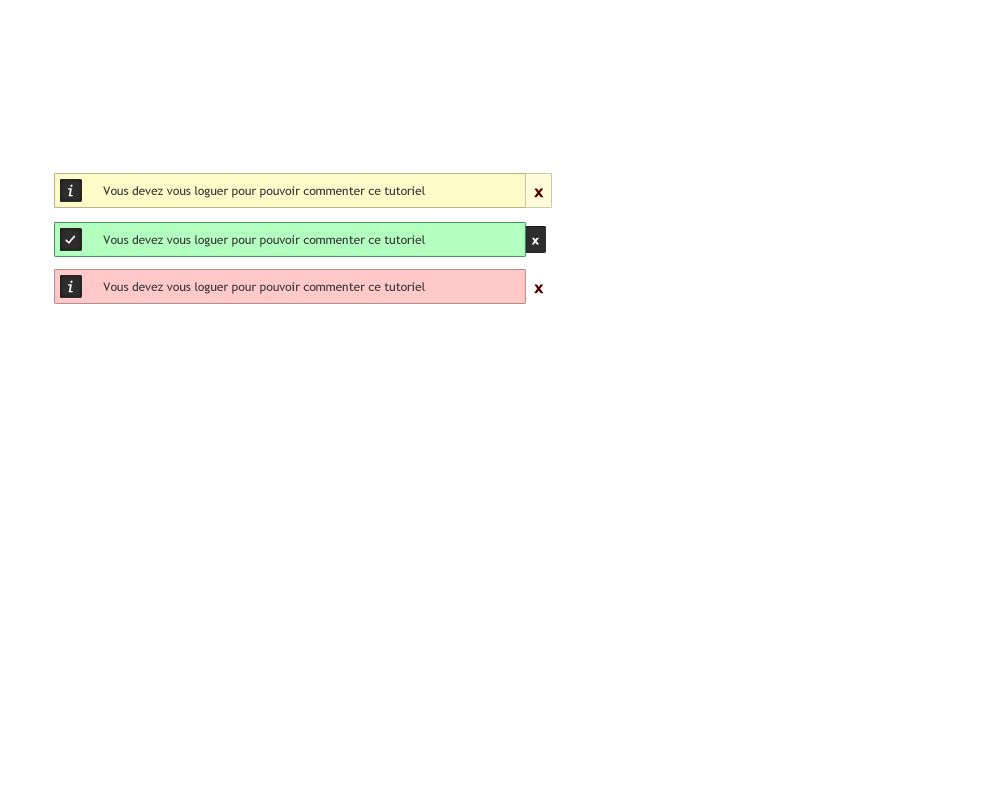
<style>
.page{position:relative;width:1000px;height:800px;background:#ffffff}
.page>*{position:absolute;margin:0}
.t1{font:14px "Monaco";color:#ffffff;font-weight:bold;font-style:italic}
.t2{font:12px "TrebuchetMS";color:#3f3f3f}
.t3{font:11.6px "TrebuchetMS-Bold";color:#560000;font-weight:bold;scale:1.2 1}
.t4{font:8.9px "TrebuchetMS-Bold";color:#ffffff;font-weight:bold;scale:1.2 1}
</style>
<div class="page">
<p class="t1" style="left:68px;top:184px;width:5px;height:13px">i</p>
<p class="t2" style="left:103px;top:186px;width:322px;height:12px">Vous devez vous loguer pour pouvoir commenter ce tutoriel</p>
<p class="t3" style="left:534px;top:188px;width:10px;height:10px">X</p>
<p class="t2" style="left:103px;top:235px;width:322px;height:12px">Vous devez vous loguer pour pouvoir commenter ce tutoriel</p>
<p class="t4" style="left:532px;top:237px;width:7px;height:8px">X</p>
<p class="t1" style="left:68px;top:280px;width:5px;height:13px">i</p>
<p class="t2" style="left:103px;top:282px;width:322px;height:12px">Vous devez vous loguer pour pouvoir commenter ce tutoriel</p>
<p class="t3" style="left:534px;top:284px;width:10px;height:10px">X</p>
</div>
